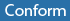
<style>
.page{position:relative;width:70px;height:21px;background:#2970a8}
.page>*{position:absolute;margin:0}
.t1{font:16.7px "MyriadPro-Regular";color:#ffffff}
</style>
<div class="page">
<p class="t1" style="left:5px;top:4px;width:61px;height:12px">Conform</p>
</div>
